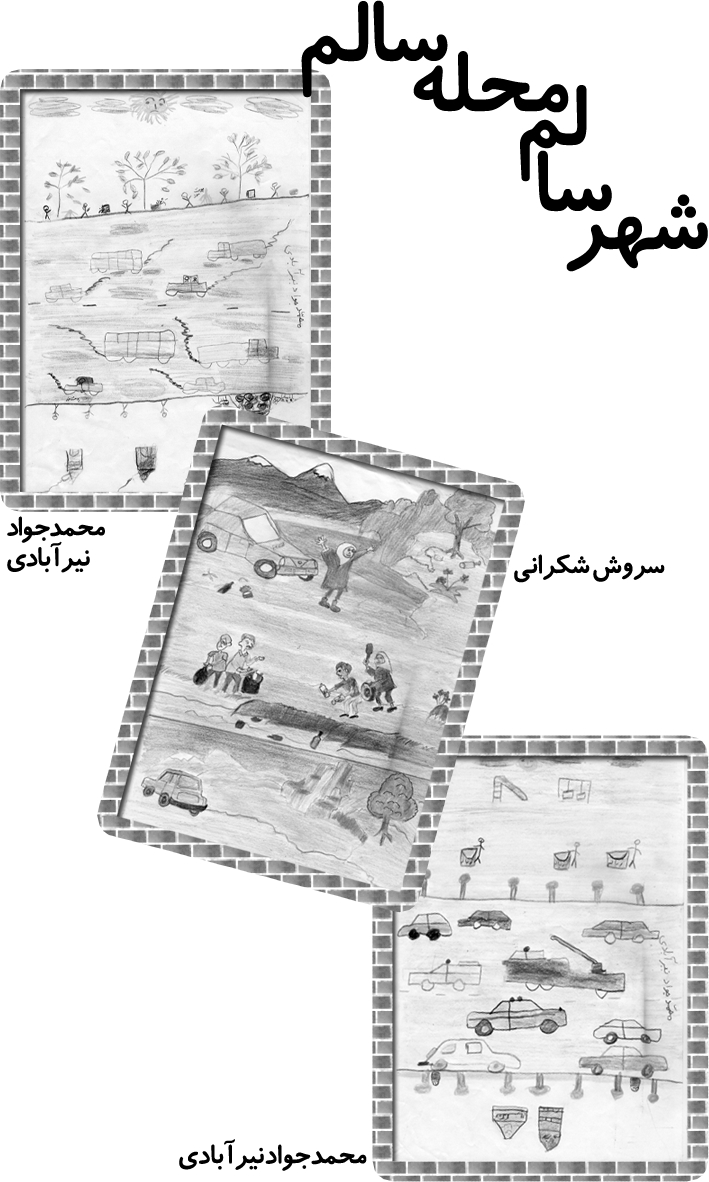
<style>
.page{position:relative;width:709px;height:1182px;background:#ffffff}
.page>*{position:absolute;margin:0}
.t1{font:30.6px/30.6px "BKoodakBold";letter-spacing:-0.025em;color:#000000}
.t2{font:30.6px "BKoodakBold";letter-spacing:-0.025em;color:#000000}
</style>
<div class="page">
<p class="t1" style="left:7px;top:516px;width:98px;height:57px;text-align:right">محمدجواد <br>نيرآبادي</p>
<p class="t2" style="left:514px;top:554px;width:151px;height:29px">سروش شكراني</p>
<p class="t2" style="left:179px;top:1139px;width:188px;height:32px">محمدجواد نيرآبادي</p>
</div>
